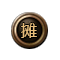
<style>
.page{position:relative;width:60px;height:60px;background:#ffffff}
.page>*{position:absolute;margin:0}
.t1{font:16px "MicrosoftYaHei";color:#e6bd7c}
</style>
<div class="page">
<p class="t1" style="left:21px;top:23px;width:16px;height:15px">摊</p>
</div>
